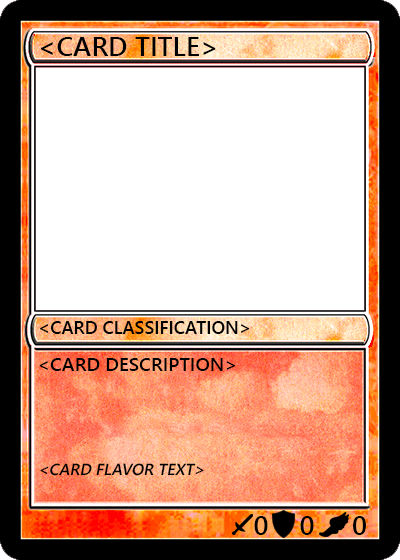
<style>
.page{position:relative;width:400px;height:560px;background:#ffffff}
.page>*{position:absolute;margin:0}
.t1{font:27px "YuGothicUI-Semibold";color:#000000}
.t2{font:18px "YuGothicUI-Semibold";color:#000000}
.t3{font:19px "YuGothicUI-Semibold";color:#000000}
.t4{font:16px "YuGothicUI-Semibold";color:#000000;font-style:italic}
</style>
<div class="page">
<p class="t1" style="left:41px;top:37px;width:175px;height:19px">&lt;CARD TITLE&gt;</p>
<p class="t2" style="left:40px;top:321px;width:210px;height:13px">&lt;CARD CLASSIFICATION&gt;</p>
<p class="t3" style="left:39px;top:358px;width:196px;height:13px">&lt;CARD DESCRIPTION&gt;</p>
<p class="t4" style="left:40px;top:463px;width:164px;height:13px">&lt;CARD FLAVOR TEXT&gt;</p>
<p class="t1" style="left:254px;top:516px;width:14px;height:19px">0</p>
<p class="t1" style="left:300px;top:516px;width:14px;height:19px">0</p>
<p class="t1" style="left:353px;top:516px;width:13px;height:19px">0</p>
</div>
